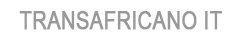
<style>
.page{position:relative;width:240px;height:40px;background:#ffffff}
.page>*{position:absolute;margin:0}
.t1{font:25px "ArialMT";color:#999999;font-weight:bold;scale:0.8 1}
</style>
<div class="page">
<p class="t1" style="left:19px;top:11px;width:203px;height:19px">TRANSAFRICANO IT</p>
</div>
